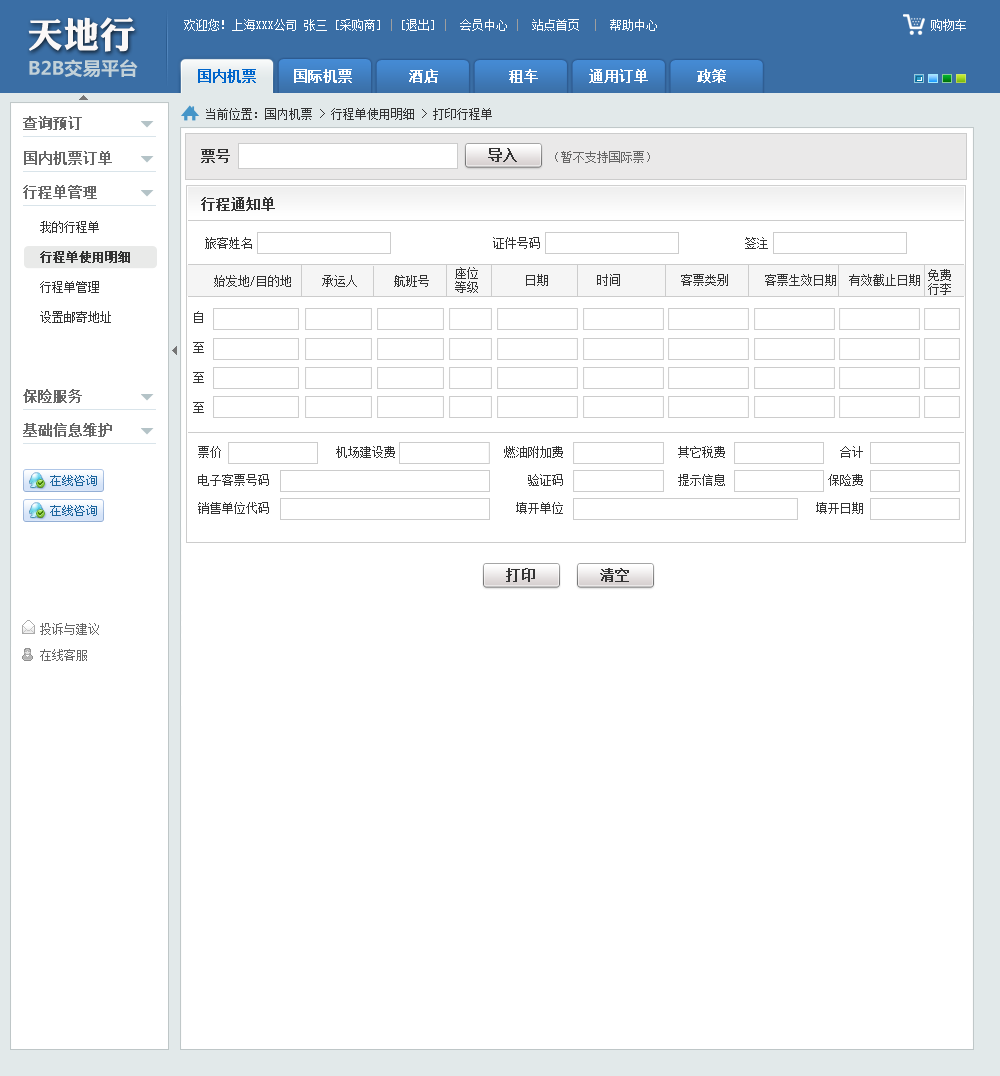
<style>
.page{position:relative;width:1000px;height:1076px;background:#ffffff}
.page>*{position:absolute;margin:0}
.t1{font:36.2px "DFPLiJinHeiW8";color:#faf7f7}
.t2{font:12px "SimSun";color:#ffffff}
.t3{font:12px "SimSun";color:#9e9e9e}
.t4{font:18.3px "MicrosoftYaHei-Bold";color:#c2d1d8}
.t5{font:14px "SimSun";color:#ffffff;font-weight:bold}
.t6{font:14px "SimSun";color:#0066cc;font-weight:bold}
.t7{font:12px "SimSun";color:#333333}
.t8{font:14px "SimSun";color:#666666;font-weight:bold}
.t9{font:14px "SimSun";color:#333333;font-weight:bold}
.t10{font:12px "SimSun";color:#666666}
.t11{font:12px/30px "SimSun";color:#333333}
.t12{font:12px/30px "SimSun";color:#333333;font-weight:bold}
.t13{font:12px/14px "SimSun";color:#333333}
.t14{font:12px/26px "SimSun";color:#666666}
</style>
<div class="page">
<p class="t1" style="left:28px;top:17px;width:107px;height:35px">天地行</p>
<p class="t2" style="left:184px;top:19px;width:473px;height:12px">欢迎您！上海XXX公司 张三 [采购商]<span class="t3"> | </span>[退出] <span class="t3">|</span>  会员中心 <span class="t3">|</span>  站点首页  <span class="t3">|</span>  帮助中心</p>
<p class="t2" style="left:931px;top:19px;width:35px;height:12px">购物车</p>
<p class="t4" style="left:29px;top:59px;width:109px;height:19px">B2B交易平台</p>
<p class="t5" style="left:198px;top:69px;width:528px;height:14px"><span class="t6">国内机票</span>    国际机票     酒店     租车     通用订单      政策</p>
<p class="t7" style="left:206px;top:108px;width:286px;height:12px">当前位置：国内机票 &gt; 行程单使用明细 &gt; 打印行程单</p>
<p class="t8" style="left:23px;top:116px;width:59px;height:14px">查询预订</p>
<p class="t9" style="left:201px;top:149px;width:29px;height:14px">票号</p>
<p class="t9" style="left:488px;top:148px;width:29px;height:14px">导入</p>
<p class="t8" style="left:24px;top:151px;width:88px;height:14px">国内机票订单</p>
<p class="t10" style="left:555px;top:151px;width:95px;height:12px">（暂不支持国际票）</p>
<p class="t8" style="left:23px;top:185px;width:74px;height:14px">行程单管理</p>
<p class="t9" style="left:201px;top:197px;width:74px;height:14px">行程通知单</p>
<p class="t11" style="left:40px;top:221px;width:90px;height:102px">我的行程单<br><span class="t12">行程单使用明细<br></span>行程单管理<br>设置邮寄地址</p>
<p class="t7" style="left:205px;top:237px;width:563px;height:12px">旅客姓名       证件号码      签注</p>
<p class="t13" style="left:455px;top:267px;width:23px;height:26px">座位<br>等级</p>
<p class="t13" style="left:928px;top:269px;width:23px;height:26px">免费<br>行李</p>
<p class="t7" style="left:214px;top:275px;width:215px;height:12px">始发地/目的地 承运人 航班号</p>
<p class="t7" style="left:526px;top:274px;width:394px;height:12px">日期  时间    客票类别     客票生效日期  有效截止日期</p>
<p class="t11" style="left:193px;top:311px;width:11px;height:102px">自<br>至<br>至<br>至</p>
<p class="t8" style="left:23px;top:389px;width:59px;height:14px">保险服务</p>
<p class="t8" style="left:23px;top:423px;width:89px;height:14px">基础信息维护</p>
<p class="t7" style="left:198px;top:446px;width:665px;height:12px">票价        机场建设费      燃油附加费     其它税费              合计</p>
<p class="t7" style="left:198px;top:474px;width:665px;height:12px">电子客票号码        验证码     提示信息      保险费</p>
<p class="t7" style="left:198px;top:502px;width:665px;height:12px">销售单位代码           填开单位        填开日期</p>
<p class="t9" style="left:506px;top:568px;width:29px;height:14px">打印</p>
<p class="t9" style="left:600px;top:568px;width:29px;height:14px">清空</p>
<p class="t14" style="left:40px;top:623px;width:59px;height:38px">投诉与建议 <br>在线客服</p>
</div>
